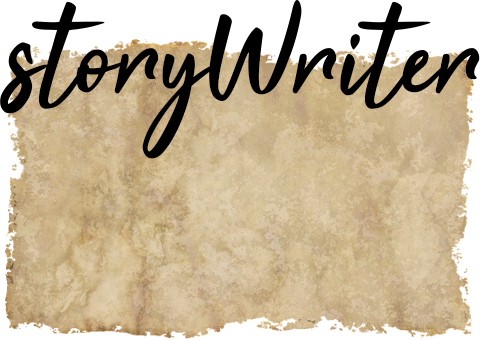
<style>
.page{position:relative;width:480px;height:340px}
.page>*{position:absolute;margin:0}
.t1{font:130px "Tahu!";color:#000000}
</style>
<div class="page">
<p class="t1" style="left:0px;top:0px;width:480px;height:159px">storyWriter</p>
</div>
